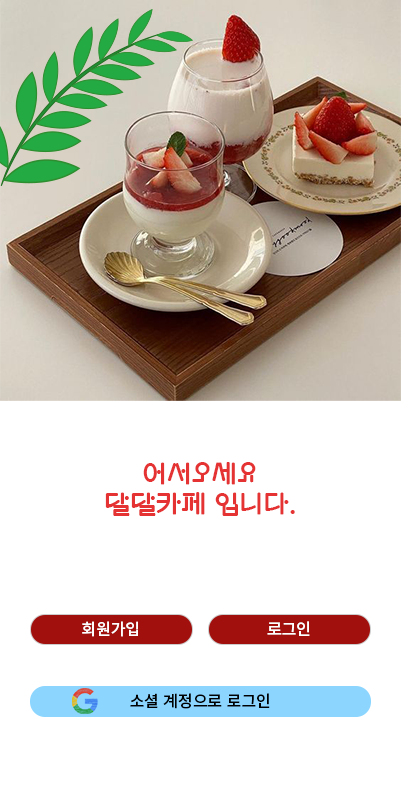
<style>
.page{position:relative;width:401px;height:796px;background:#ffffff}
.page>*{position:absolute;margin:0}
.t1{font:26px/30px "Gugi-Regular";color:#e53232}
.t2{font:16px "NotoSansKR-Medium";color:#ffffff}
.t3{font:16px "NotoSansKR-Medium";color:#000000}
</style>
<div class="page">
<p class="t1" style="left:105px;top:462px;width:190px;height:54px;text-align:center">어서오세요<br>달달카페 입니다.</p>
<p class="t2" style="left:82px;top:621px;width:56px;height:16px">회원가입</p>
<p class="t2" style="left:267px;top:621px;width:43px;height:15px">로그인</p>
<p class="t3" style="left:130px;top:693px;width:140px;height:16px">소셜 계정으로 로그인</p>
</div>
